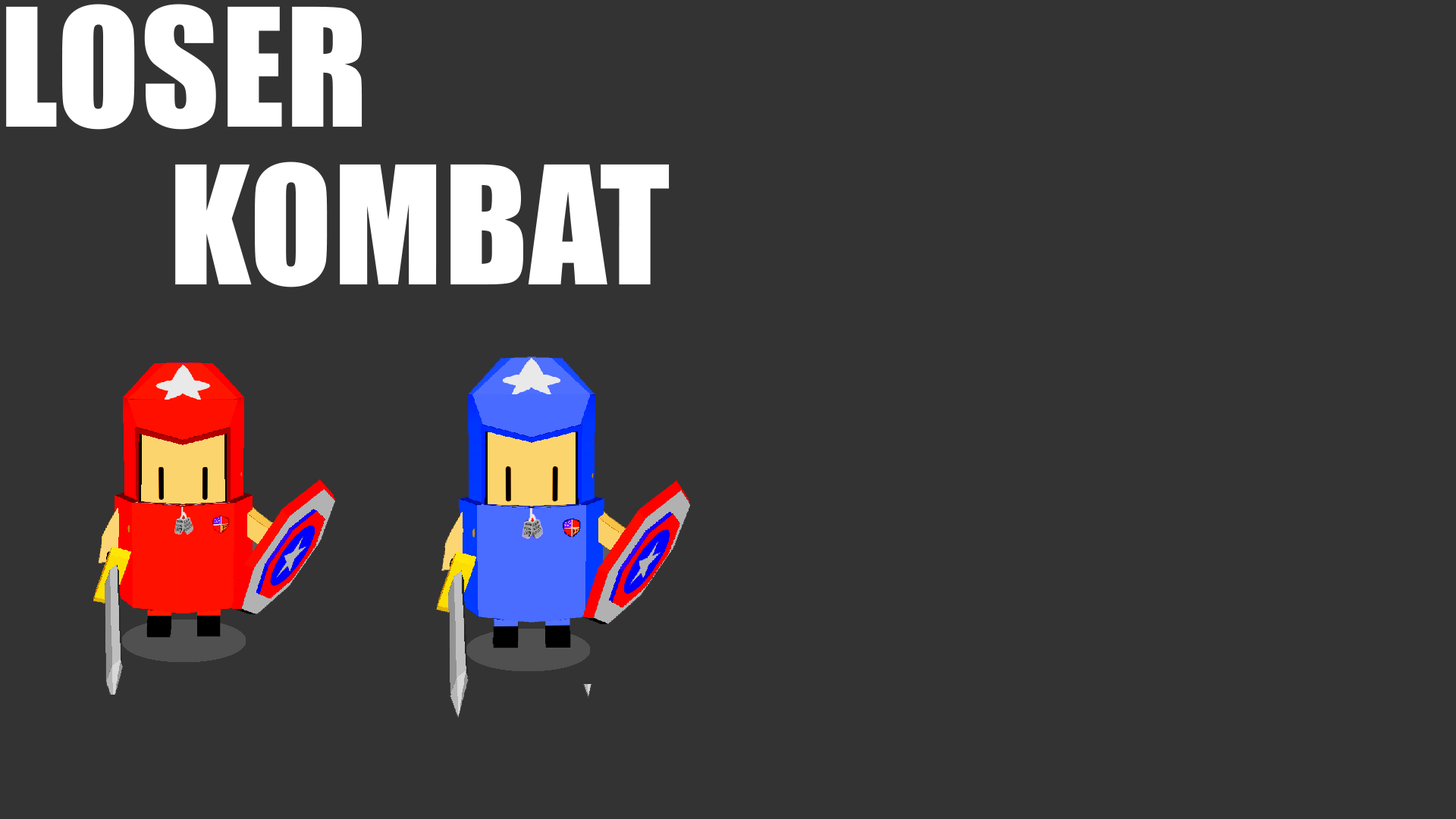
<style>
.page{position:relative;width:1456px;height:819px;background:#333333}
.page>*{position:absolute;margin:0}
.t1{font:151.7px/158px "Impact";letter-spacing:0.01em;color:#ffffff;text-transform:uppercase}
</style>
<div class="page">
<p class="t1" style="left:6px;top:4px;width:664px;height:283px">LOSER <br>      KOMBAT</p>
</div>
